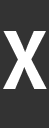
<style>
.page{position:relative;width:49px;height:128px;background:#333333}
.page>*{position:absolute;margin:0}
.t1{font:75px "AdobeGothicStd-Bold";color:#ffffff}
</style>
<div class="page">
<p class="t1" style="left:3px;top:31px;width:44px;height:58px">X</p>
</div>
